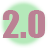
<style>
.page{position:relative;width:48px;height:48px;background:#bb8194}
.page>*{position:absolute;margin:0}
.t1{font:36px "Impact";color:#bb8194}
</style>
<div class="page">
<p class="t1" style="left:2px;top:10px;width:43px;height:28px">2.0</p>
</div>
